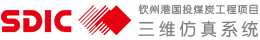
<style>
.page{position:relative;width:260px;height:40px;background:#ffffff}
.page>*{position:absolute;margin:0}
.t1{font:10px "FZY3K--GBK1-0";letter-spacing:0.1em;color:#808080}
.t2{font:17px "FZY3K--GBK1-0";letter-spacing:0.22em;color:#808080}
</style>
<div class="page">
<p class="t1" style="left:138px;top:4px;width:120px;height:11px">钦州港国投煤炭工程项目</p>
<p class="t2" style="left:138px;top:20px;width:120px;height:18px">三维仿真系统</p>
</div>
